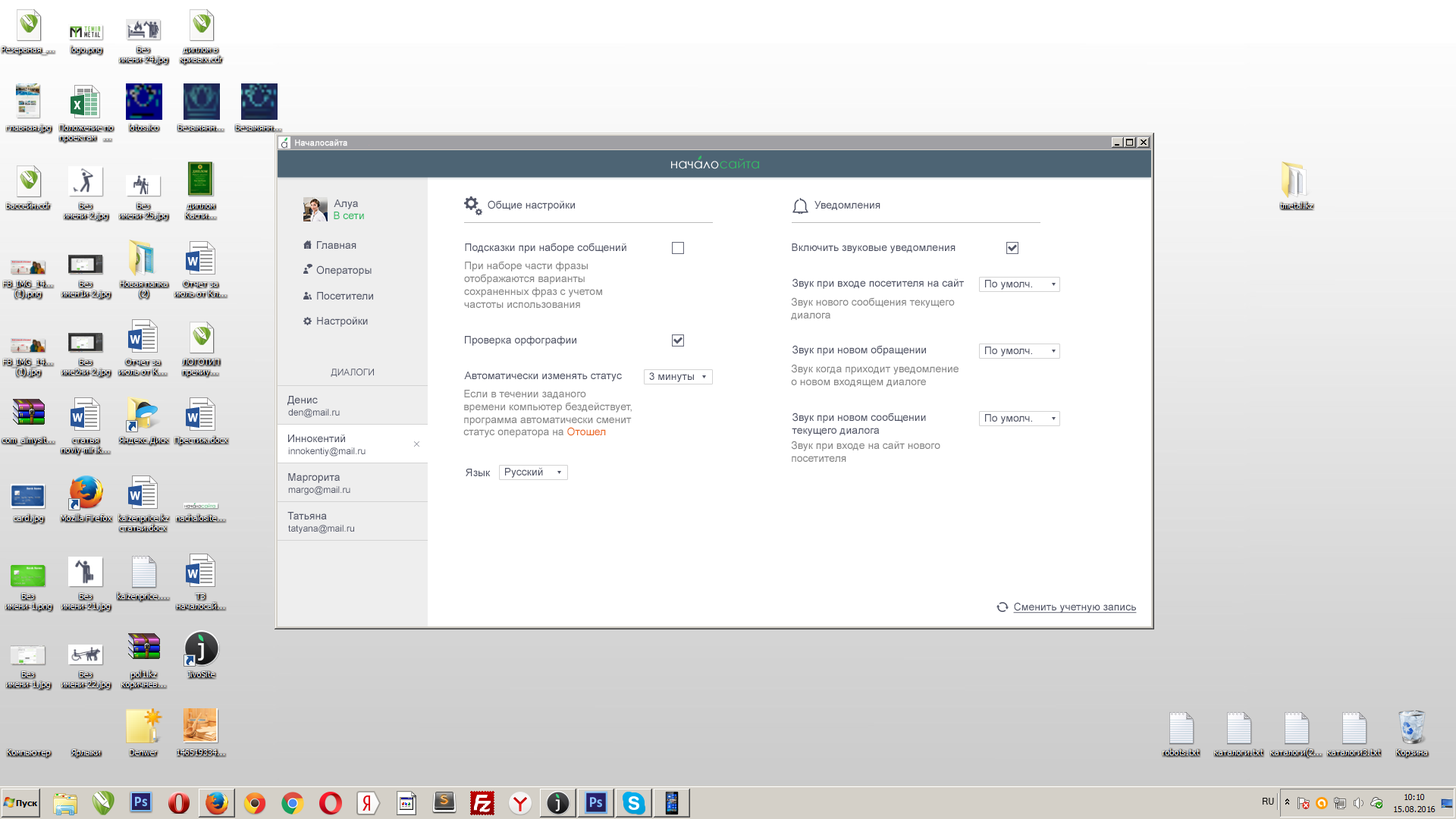
<style>
.page{position:relative;width:1456px;height:819px;background:#ffffff}
.page>*{position:absolute;margin:0}
.t1{font:10.9px "CenturyGothic";color:#3f414d;scale:0.95 1}
.t2{font:8.3px "ArialMT";color:#ffffff;font-weight:bold}
.t3{font:13.3px "CenturyGothic";color:#ffffff}
.t4{font:13.3px "CenturyGothic";color:#34ba65}
.t5{font:10.6px "ArialMT";color:#515567}
.t6{font:10.6px "ArialMT";color:#34ba65}
.t7{font:10.6px "ArialMT";color:#868686}
.t8{font:9.1px "ArialMT";color:#515567}
.t9{font:10.6px "ArialMT";color:#eb6821}
.t10{font:10.6px "ArialMT";color:#515567;text-decoration:underline}
</style>
<div class="page">
<p class="t1" style="left:281px;top:142px;width:6px;height:7px">а</p>
<p class="t2" style="left:295px;top:139px;width:52px;height:7px">Началосайта</p>
<p class="t3" style="left:671px;top:158px;width:88px;height:11px">начало<span class="t4">сайта</span></p>
<p class="t5" style="left:334px;top:199px;width:24px;height:10px">Алуа</p>
<p class="t5" style="left:488px;top:200px;width:87px;height:11px">Общие настройки</p>
<p class="t5" style="left:814px;top:201px;width:66px;height:9px">Уведомления</p>
<p class="t6" style="left:334px;top:212px;width:30px;height:7px">В сети</p>
<p class="t5" style="left:316px;top:241px;width:57px;height:86px">Главная<br><br>Операторы<br><br>Посетители<br><br>Настройки</p>
<p class="t5" style="left:465px;top:243px;width:161px;height:10px">Подсказки при наборе собщений</p>
<p class="t5" style="left:792px;top:243px;width:163px;height:10px">Включить звуковые уведомления</p>
<p class="t7" style="left:464px;top:261px;width:138px;height:47px">При наборе части фразы <br>отображаются варианты <br>сохраненных фраз с учетом <br>частоты использования</p>
<p class="t5" style="left:792px;top:278px;width:172px;height:11px">Звук при входе посетителя на сайт</p>
<p class="t5" style="left:985px;top:280px;width:47px;height:10px">По умолч.</p>
<p class="t7" style="left:791px;top:297px;width:164px;height:23px">Звук нового сообщения текущего <br>диалога</p>
<p class="t5" style="left:465px;top:336px;width:111px;height:10px">Проверка орфографии</p>
<p class="t5" style="left:792px;top:345px;width:134px;height:11px">Звук при новом обращении</p>
<p class="t5" style="left:985px;top:347px;width:47px;height:9px">По умолч.</p>
<p class="t7" style="left:791px;top:364px;width:168px;height:23px">Звук когда приходит уведомление<br>о новом входящем диалоге</p>
<p class="t8" style="left:331px;top:369px;width:43px;height:8px">ДИАЛОГИ</p>
<p class="t5" style="left:464px;top:372px;width:158px;height:9px">Автоматически изменять статус</p>
<p class="t5" style="left:649px;top:372px;width:45px;height:10px">3 минуты</p>
<p class="t7" style="left:463px;top:390px;width:169px;height:48px">Если в течении заданого <br>времени компьютер бездействует,<br>программа автоматически сменит <br>статус оператора на <span class="t9">Отошел</span></p>
<p class="t5" style="left:287px;top:396px;width:31px;height:10px">Денис</p>
<p class="t8" style="left:288px;top:409px;width:52px;height:9px">den@mail.ru</p>
<p class="t5" style="left:792px;top:413px;width:134px;height:23px">Звук при новом сообщении<br>текущего диалога</p>
<p class="t5" style="left:985px;top:414px;width:47px;height:10px">По умолч.</p>
<p class="t5" style="left:288px;top:434px;width:57px;height:8px">Иннокентий</p>
<p class="t8" style="left:288px;top:447px;width:78px;height:10px">innokentiy@mail.ru</p>
<p class="t7" style="left:791px;top:441px;width:149px;height:21px">Звук при входе на сайт нового <br>посетителя</p>
<p class="t5" style="left:288px;top:473px;width:52px;height:10px">Маргорита</p>
<p class="t5" style="left:466px;top:469px;width:25px;height:7px">Язык</p>
<p class="t5" style="left:505px;top:467px;width:38px;height:11px">Русский</p>
<p class="t8" style="left:288px;top:486px;width:62px;height:9px">margo@mail.ru</p>
<p class="t5" style="left:287px;top:512px;width:40px;height:7px">Татьяна</p>
<p class="t8" style="left:288px;top:525px;width:66px;height:9px">tatyana@mail.ru</p>
<p class="t10" style="left:1013px;top:602px;width:124px;height:11px">Сменить учетную запись</p>
</div>
